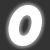
<style>
.page{position:relative;width:50px;height:50px;background:#333333}
.page>*{position:absolute;margin:0}
.t1{font:50px "LEMONMILK-BoldItalic";color:#ffffff}
</style>
<div class="page">
<p class="t1" style="left:8px;top:5px;width:34px;height:41px">0</p>
</div>
